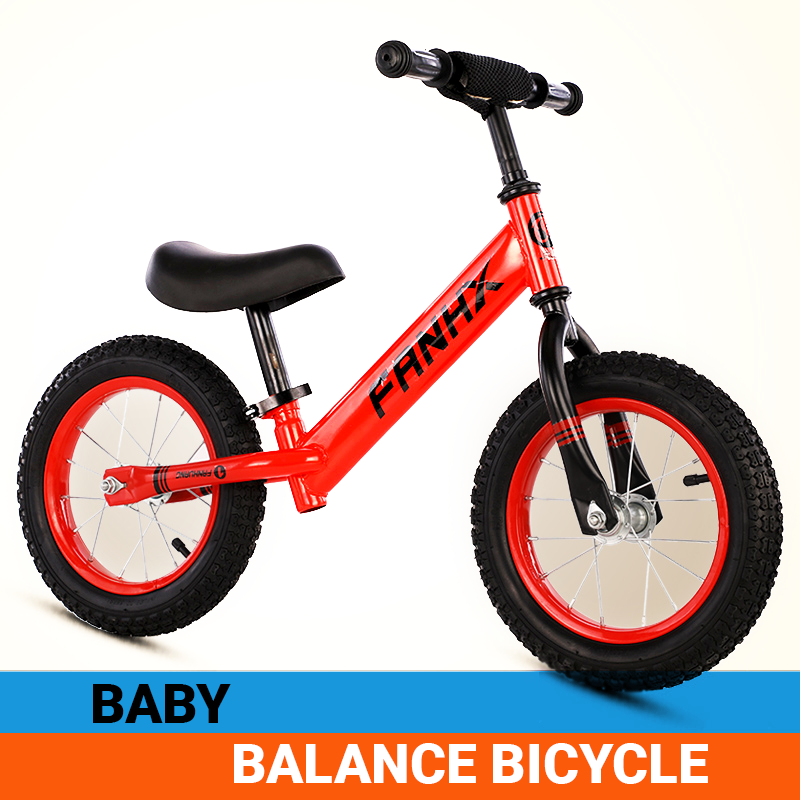
<style>
.page{position:relative;width:800px;height:800px;background:#ffffff}
.page>*{position:absolute;margin:0}
.t1{font:55px "Roboto-Black";color:#010101;text-transform:uppercase}
.t2{font:55px "Roboto-Black";color:#ffffff;text-transform:uppercase}
</style>
<div class="page">
<p class="t1" style="left:93px;top:684px;width:138px;height:39px">Baby</p>
<p class="t2" style="left:234px;top:743px;width:474px;height:41px">Balance Bicycle</p>
</div>
